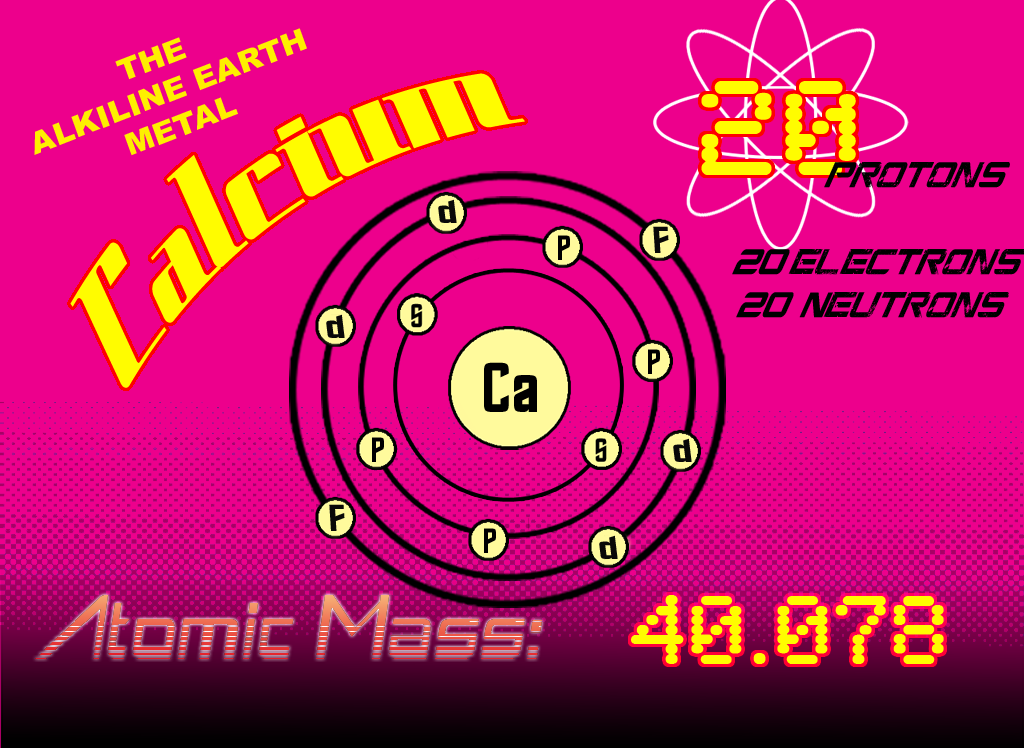
<style>
.page{position:relative;width:1024px;height:748px;background:#ed008c}
.page>*{position:absolute;margin:0}
.t1{font:30px "Arial-Black";color:#feef00;scale:1.04 1}
.t2{font:137.4px "SpaceCadetNF";color:#fffc00;scale:0.84 1}
.t3{font:140px "SynchroLET";color:#fffc00}
.t4{font:39.4px "CGFLocustResistance";color:#000000;scale:0.67 1}
.t5{font:30px "Roddenberry";color:#090908;scale:1.62 1}
.t6{font:33.5px "Roddenberry";color:#090908;scale:1.34 1}
.t7{font:63.1px "Roddenberry";color:#000000;scale:1.07 1}
.t8{font:100px "SynchroLET";color:#fffc00}
</style>
<div class="page">
<p class="t1" style="left:34px;top:28px;width:273px;height:128px;text-align:center;rotate:-21deg">THE <br>ALKILINE EARTH<br>METAL</p>
<p class="t2" style="left:70px;top:73px;width:455px;height:315px;rotate:-34deg">Calcium</p>
<p class="t3" style="left:701px;top:81px;width:155px;height:94px">20</p>
<p class="t4" style="left:732px;top:162px;width:294px;height:156px;text-align:center">ProtonS<br><br>20 electrons<br>    20  Neutrons</p>
<p class="t5" style="left:438px;top:199px;width:19px;height:24px">d</p>
<p class="t6" style="left:653px;top:226px;width:16px;height:27px">F</p>
<p class="t7" style="left:484px;top:362px;width:53px;height:50px">Ca</p>
<p class="t8" style="left:631px;top:595px;width:313px;height:69px">40.078</p>
</div>
